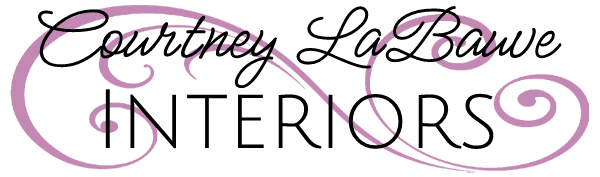
<style>
.page{position:relative;width:600px;height:177px;background:#ffffff}
.page>*{position:absolute;margin:0}
.t1{font:82px "MeowScript-Regular";color:#000000}
.t2{font:82px "JuliusSansOne-Regular";color:#000000}
</style>
<div class="page">
<p class="t1" style="left:37px;top:6px;width:525px;height:83px">Courtney LaBauve</p>
<p class="t2" style="left:105px;top:89px;width:389px;height:60px">Interiors</p>
</div>
